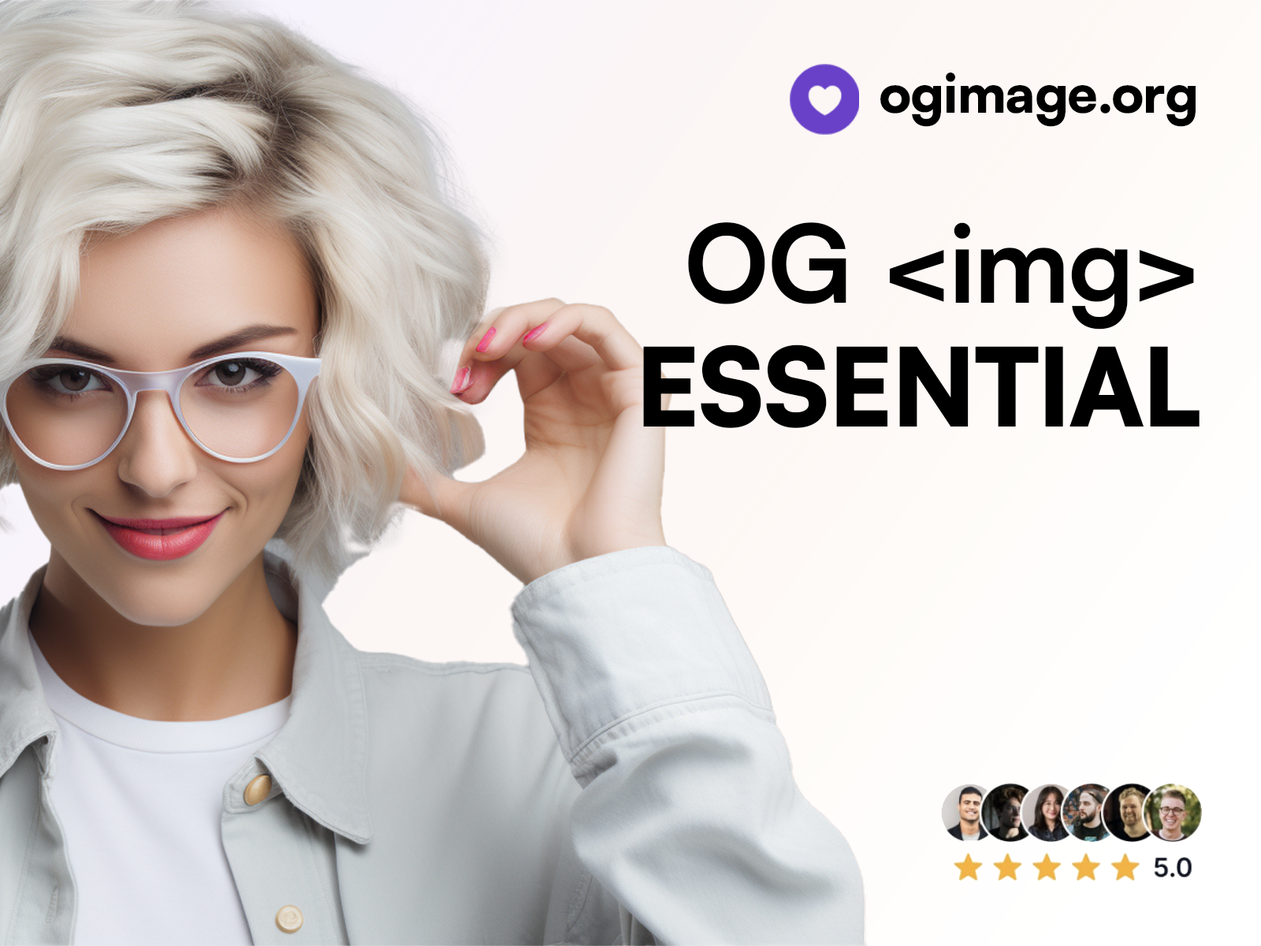
<style>
.page{position:relative;width:1261px;height:946px}
.page>*{position:absolute;margin:0}
.t1{font:53.4px "SatoshiVariable-Bold";color:#000000}
.t2{font:108px/123.7px "SatoshiVariable-Bold";color:#000000}
</style>
<div class="page">
<p class="t1" style="left:880px;top:73px;width:316px;height:54px">ogimage.org</p>
<p class="t2" style="left:643px;top:222px;width:556px;height:206px;text-align:right">OG &lt;img&gt;<br>ESSENTIAL</p>
</div>
